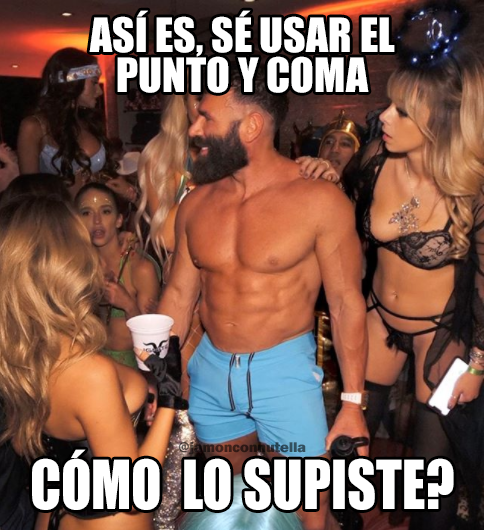
<style>
.page{position:relative;width:484px;height:530px}
.page>*{position:absolute;margin:0}
.t1{font:43.8px "Impact";color:#ffffff}
.t2{font:62.3px "Impact";color:#ffffff;scale:0.9 1}
.t3{font:14.7px "FranklinGothic-Heavy"}
</style>
<div class="page">
<p class="t1" style="left:89px;top:10px;width:306px;height:83px;text-align:center">ASÍ ES, SÉ USAR EL<br>PUNTO Y COMA</p>
<p class="t2" style="left:32px;top:449px;width:422px;height:61px">CÓMO  LO SUPISTE?</p>
<p class="t3" style="left:178px;top:442px;width:128px;height:13px">@jamonconnutella</p>
</div>
